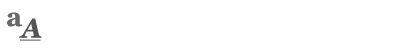
<style>
.page{position:relative;width:401px;height:50px;background:#ffffff}
.page>*{position:absolute;margin:0}
.t1{font:26.9px "Vani-Bold";letter-spacing:-0.075em;color:#696969}
.t2{font:26.9px "Vani-Bold";letter-spacing:-0.075em;color:#555555;font-style:italic}
</style>
<div class="page">
<p class="t1" style="left:7px;top:12px;width:35px;height:26px">a<span class="t2">A</span></p>
</div>
